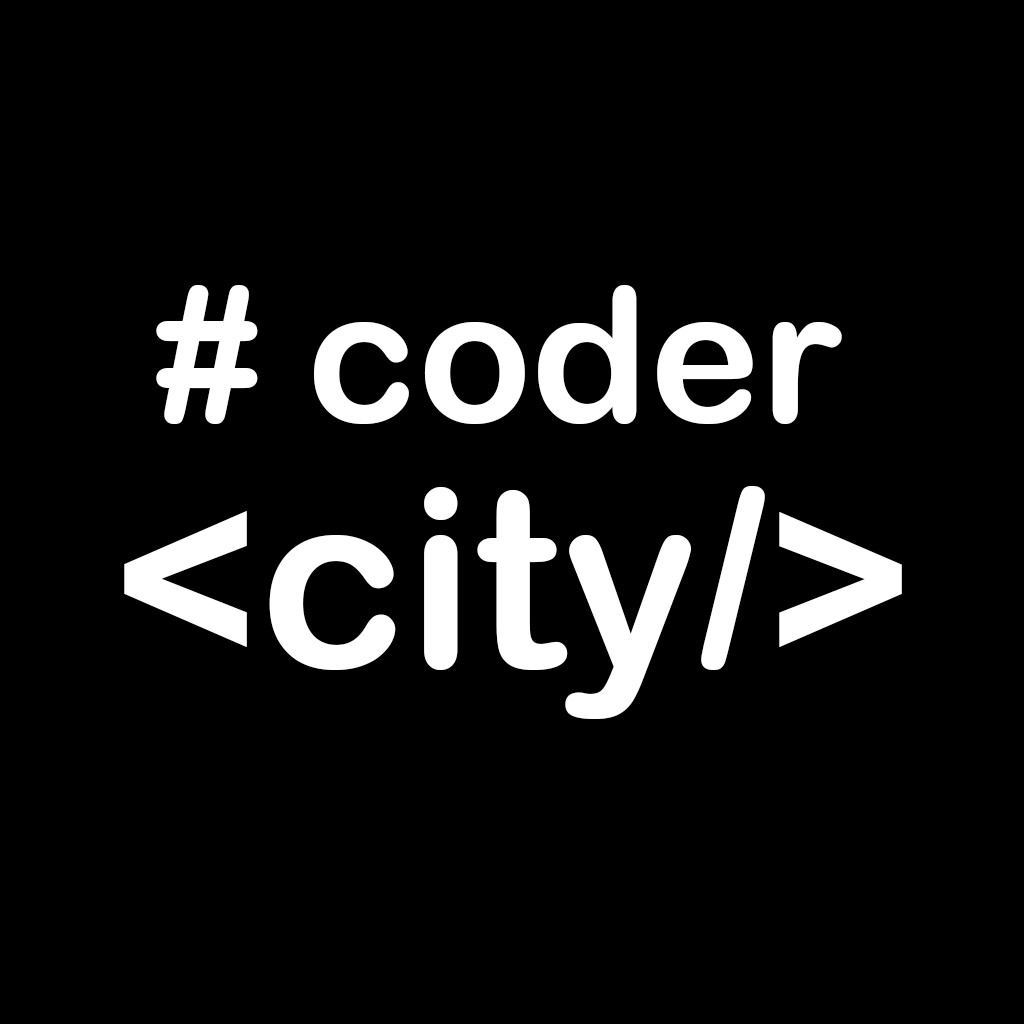
<style>
.page{position:relative;width:1024px;height:1024px;background:#000000}
.page>*{position:absolute;margin:0}
.t1{font:187.9px "ArialRoundedMTBold";color:#ffffff}
.t2{font:249.2px "ArialRoundedMTBold";color:#ffffff}
</style>
<div class="page">
<p class="t1" style="left:156px;top:285px;width:686px;height:139px"># coder</p>
<p class="t2" style="left:124px;top:486px;width:778px;height:233px">&lt;city/&gt;</p>
</div>
